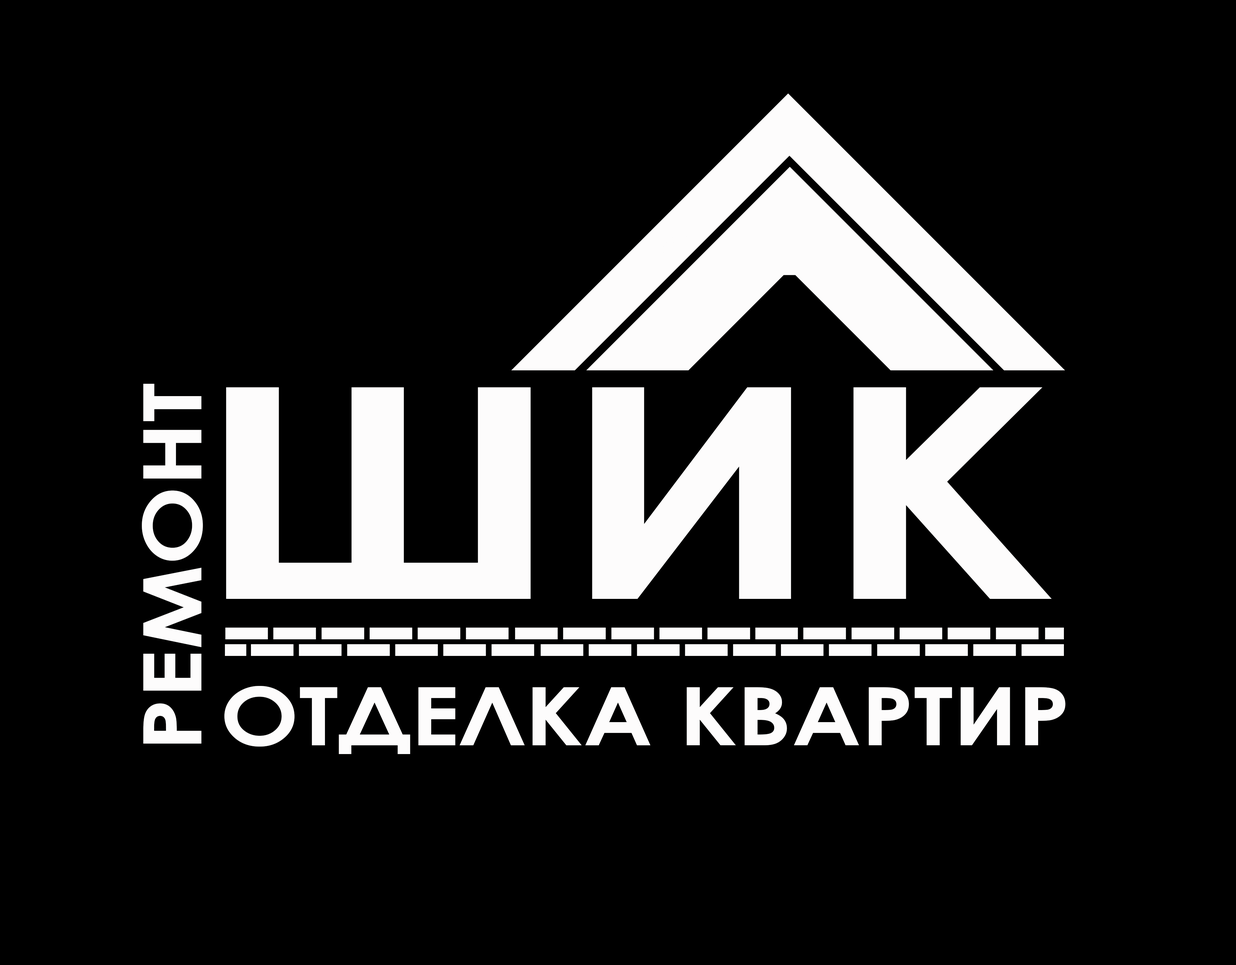
<style>
.page{position:relative;width:1236px;height:965px;background:#000000}
.page>*{position:absolute;margin:0}
.t1{font:80.8px "CenturyGothic-Bold";color:#fdfcfc;scale:1.16 1}
.t2{font:294.5px "CenturyGothic-Bold";color:#fdfcfc;scale:1.29 1}
</style>
<div class="page">
<p class="t1" style="left:142px;top:384px;width:61px;height:359px;rotate:-90deg">РЕМОНТ</p>
<p class="t2" style="left:226px;top:387px;width:826px;height:212px">ШИК</p>
<p class="t1" style="left:224px;top:686px;width:841px;height:68px">ОТДЕЛКА КВАРТИР</p>
</div>
